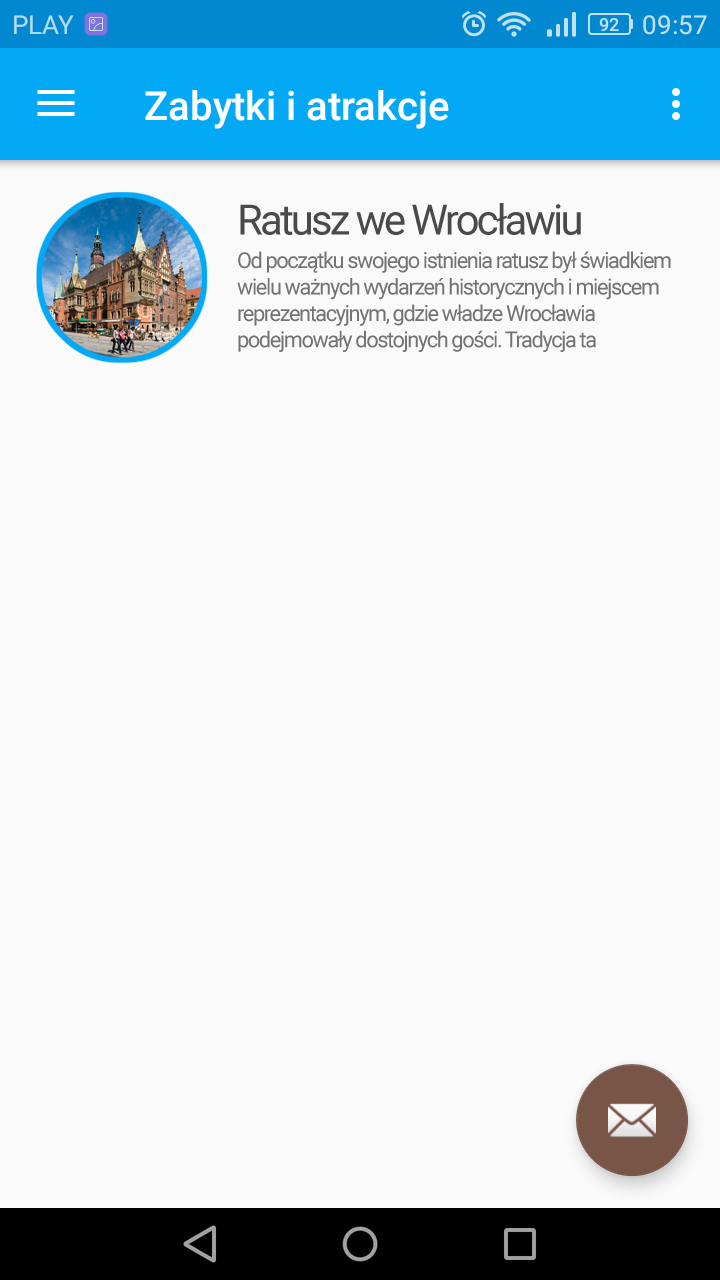
<style>
.page{position:relative;width:720px;height:1280px;background:#fafafa}
.page>*{position:absolute;margin:0}
.t1{font:22px "Roboto-Regular";letter-spacing:-0.065em;color:#737373}
.t2{font:42px "Roboto-Regular";letter-spacing:-0.065em;color:#4a4a4a}
</style>
<div class="page">
<p class="t1" style="left:237px;top:203px;width:434px;height:149px"><span class="t2">Ratusz we Wrocławiu<br> <br></span>Od początku swojego istnienia ratusz był świadkiem wielu ważnych wydarzeń historycznych i miejscem reprezentacyjnym, gdzie władze Wrocławia podejmowały dostojnych gości. Tradycja ta</p>
</div>
